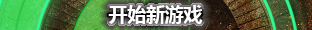
<style>
.page{position:relative;width:312px;height:30px}
.page>*{position:absolute;margin:0}
.t1{font:18.8px "MicrosoftYaHei-Bold";color:#ffffff}
</style>
<div class="page">
<p class="t1" style="left:108px;top:5px;width:95px;height:19px">开始新游戏</p>
</div>
